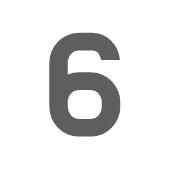
<style>
.page{position:relative;width:170px;height:170px;background:#ffffff}
.page>*{position:absolute;margin:0}
.t1{font:150px "DoHyeon-Regular";color:#5e5e5e}
</style>
<div class="page">
<p class="t1" style="left:49px;top:32px;width:72px;height:105px">6</p>
</div>
